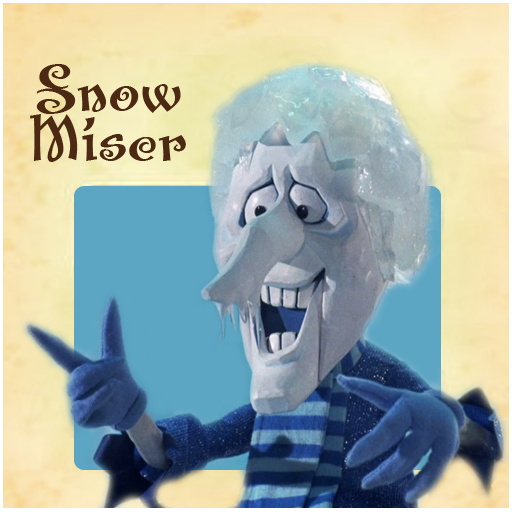
<style>
.page{position:relative;width:512px;height:512px}
.page>*{position:absolute;margin:0}
.t1{font:66.7px/50px "SantasBigSecretBB";color:#4c2913}
</style>
<div class="page">
<p class="t1" style="left:30px;top:64px;width:156px;height:98px;text-align:center">Snow<br>Miser</p>
</div>
